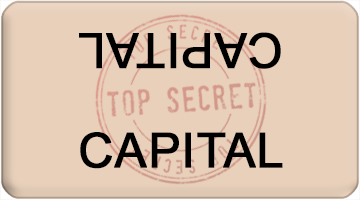
<style>
.page{position:relative;width:360px;height:200px;background:#e8d0bb}
.page>*{position:absolute;margin:0}
.t1{font:48px "ArialMT";color:#000000;font-weight:bold}
</style>
<div class="page">
<p class="t1" style="left:79px;top:32px;width:202px;height:37px;rotate:180deg">CAPITAL</p>
<p class="t1" style="left:80px;top:132px;width:203px;height:37px">CAPITAL</p>
</div>
